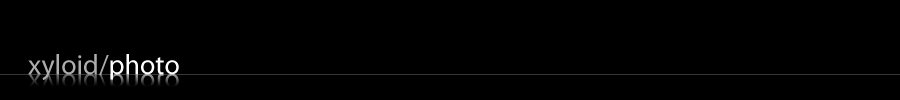
<style>
.page{position:relative;width:900px;height:100px;background:#000000}
.page>*{position:absolute;margin:0}
.t1{font:28px "MyriadPro-Regular";color:#adadad}
.t2{font:28px "MyriadPro-Regular";color:#ffffff}
</style>
<div class="page">
<p class="t1" style="left:28px;top:54px;width:151px;height:26px">xyloid/<span class="t2">photo</span></p>
</div>
